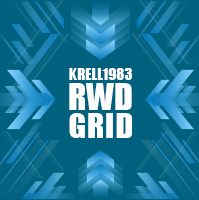
<style>
.page{position:relative;width:199px;height:200px;background:#00617f}
.page>*{position:absolute;margin:0}
.t1{font:15.2px "Impact";color:#ffffff;text-transform:uppercase}
.t2{font:34.1px/30px "Impact";color:#ffffff;text-transform:uppercase}
.t3{font:31.6px/28px "Impact";letter-spacing:0.05em;color:#ffffff;text-transform:uppercase}
</style>
<div class="page">
<p class="t1" style="left:69px;top:68px;width:63px;height:70px;text-align:center">Krell1983<br><span class="t2">RWD<br></span><span class="t3">GRID</span></p>
</div>
